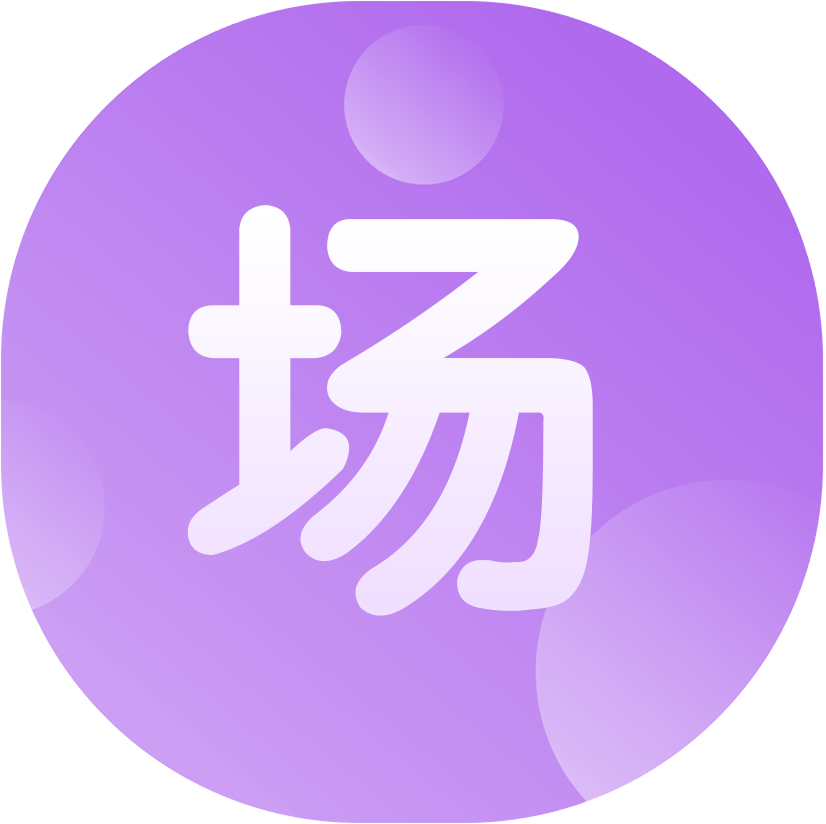
<style>
.page{position:relative;width:826px;height:824px}
.page>*{position:absolute;margin:0}
.t1{font:450px "FZY4JW--GB1-0";color:#f8f0ff}
</style>
<div class="page">
<p class="t1" style="left:187px;top:205px;width:406px;height:411px">场</p>
</div>
